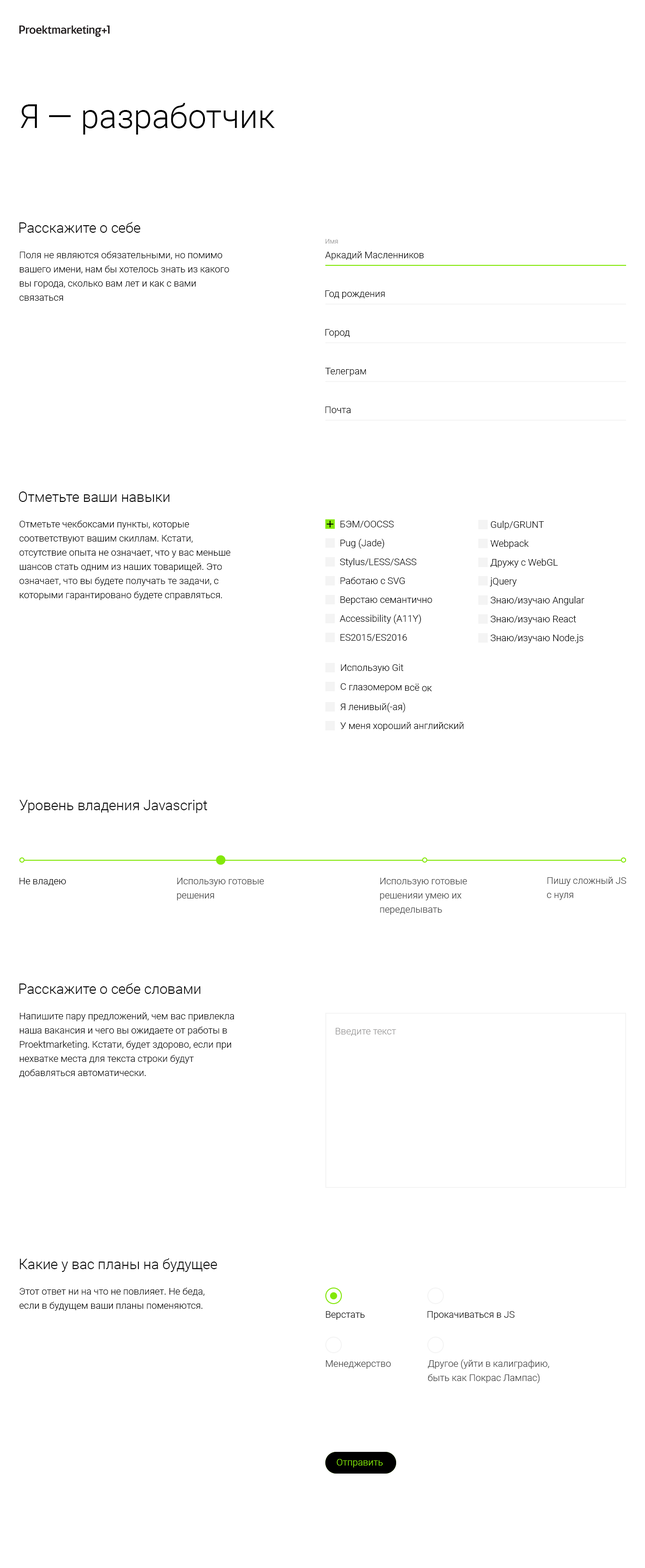
<style>
.page{position:relative;width:645px;height:1568px;background:#ffffff}
.page>*{position:absolute;margin:0}
.t1{font:33.1px "Roboto-Light";color:#000000}
.t2{font:14.2px "Roboto-Light";color:#000000}
.t3{font:6.6px "Roboto-Light";color:#969595}
.t4{font:9.4px/14.2px "Roboto-Light";color:#000000}
.t5{font:9.4px "Roboto-Light";color:#000000}
.t6{font:9.4px/14.2px "Roboto-Light";color:#3d3d3d}
.t7{font:9.4px "Roboto-Light";color:#969595}
.t8{font:9.4px "Roboto-Light";color:#3d3d3d}
.t9{font:9.4px "Roboto-Light";color:#83e80a}
</style>
<div class="page">
<p class="t1" style="left:21px;top:103px;width:254px;height:32px">Я — разработчик</p>
<p class="t2" style="left:19px;top:222px;width:121px;height:11px">Расскажите о себе</p>
<p class="t3" style="left:325px;top:239px;width:13px;height:5px">Имя</p>
<p class="t4" style="left:19px;top:251px;width:210px;height:50px">Поля не являются обязательными, но помимо вашего имени, нам бы хотелось знать из какого вы города, сколько вам лет и как с вами связаться</p>
<p class="t5" style="left:325px;top:251px;width:99px;height:9px">Аркадий Масленников</p>
<p class="t5" style="left:325px;top:290px;width:60px;height:9px">Год рождения</p>
<p class="t5" style="left:325px;top:329px;width:25px;height:9px">Город</p>
<p class="t5" style="left:325px;top:368px;width:41px;height:8px">Телеграм</p>
<p class="t5" style="left:325px;top:407px;width:26px;height:6px">Почта</p>
<p class="t2" style="left:19px;top:492px;width:151px;height:10px">Отметьте ваши навыки</p>
<p class="t4" style="left:19px;top:520px;width:211px;height:80px">Отметьте чекбоксами пункты, которые соответствуют вашим скиллам. Кстати, отсутствие опыта не означает, что у вас меньше шансов стать одним из наших товарищей. Это означает, что вы будете получать те задачи, с которыми гарантировано будете справляться.</p>
<p class="t4" style="left:339px;top:521px;width:93px;height:120px">БЭМ/OOCSS<br>Pug (Jade)<br>Stylus/LESS/SASS<br>Работаю с SVG<br>Верстаю семантично<br>Accessibility (A11Y)<br>ES2015/ES2016</p>
<p class="t4" style="left:490px;top:521px;width:95px;height:122px">Gulp/GRUNT<br>Webpack<br>Дружу с WebGL<br>jQuery<br>Знаю/изучаю Angular<br>Знаю/изучаю React<br>Знаю/изучаю Node.js</p>
<p class="t4" style="left:340px;top:664px;width:124px;height:67px">Использую Git<br>С глазомером всё ок<br>Я ленивый(-ая)<br>У меня хороший английский</p>
<p class="t2" style="left:19px;top:800px;width:188px;height:13px">Уровень владения Javascript</p>
<p class="t5" style="left:19px;top:878px;width:47px;height:8px">Не владею</p>
<p class="t6" style="left:177px;top:878px;width:87px;height:22px">Использую готовые<br>решения</p>
<p class="t6" style="left:380px;top:878px;width:87px;height:37px">Использую готовые <br>решенияи умею их <br>переделывать</p>
<p class="t6" style="left:547px;top:877px;width:79px;height:23px">Пишу сложный JS <br>с нуля</p>
<p class="t2" style="left:19px;top:983px;width:182px;height:11px">Расскажите о себе словами</p>
<p class="t4" style="left:19px;top:1012px;width:215px;height:65px">Напишите пару предложений, чем вас привлекла наша вакансия и чего вы ожидаете от работы в Proektmarketing. Кстати, будет здорово, если при нехватке места для текста строки будут добавляться автоматически.</p>
<p class="t7" style="left:336px;top:1028px;width:60px;height:8px">Введите текст</p>
<p class="t2" style="left:20px;top:1258px;width:197px;height:14px">Какие у вас планы на будущее</p>
<p class="t4" style="left:19px;top:1288px;width:185px;height:23px">Этот ответ ни на что не повлияет. Не беда, <br>если в будущем ваши планы поменяются.</p>
<p class="t5" style="left:326px;top:1311px;width:39px;height:9px">Верстать</p>
<p class="t5" style="left:427px;top:1311px;width:88px;height:9px">Прокачиваться в JS</p>
<p class="t8" style="left:326px;top:1360px;width:65px;height:9px">Менеджерство</p>
<p class="t6" style="left:428px;top:1359px;width:121px;height:24px">Другое (уйти в калиграфию,<br>быть как Покрас Лампас)</p>
<p class="t9" style="left:337px;top:1459px;width:46px;height:8px">Отправить</p>
<p class="t9" style="left:337px;top:1459px;width:46px;height:8px">Отправить</p>
</div>
